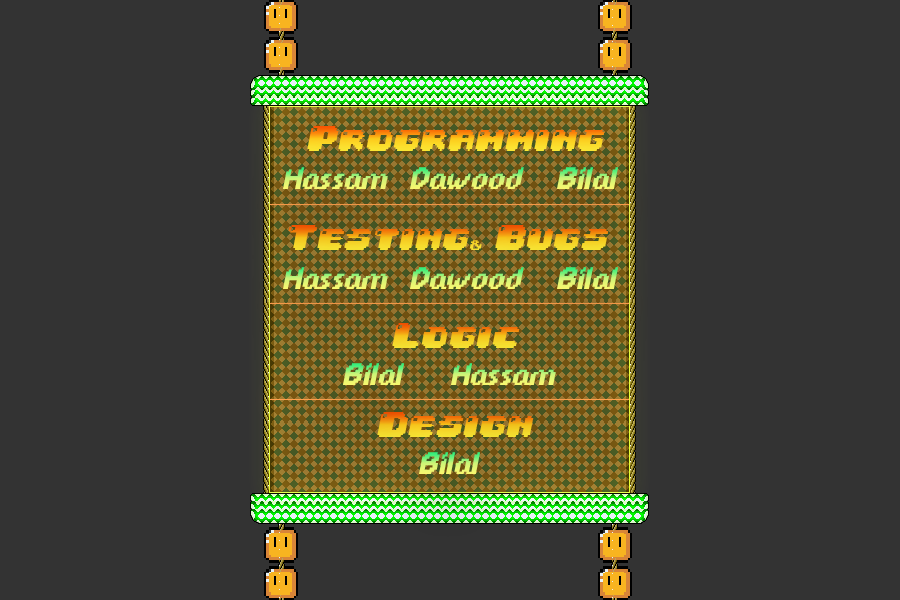
<style>
.page{position:relative;width:900px;height:600px;background:#333333}
.page>*{position:absolute;margin:0}
.t1{font:30px "04b30";font-style:italic;scale:1.11 1}
.t2{font:33.8px "DPComicRegular";font-style:italic;scale:1.11 1}
.t3{font:11.2px "PublicPixel";font-style:italic;scale:1.11 1}
</style>
<div class="page">
<p class="t1" style="left:307px;top:126px;width:298px;height:25px">Programming</p>
<p class="t2" style="left:283px;top:167px;width:105px;height:22px">Hassam</p>
<p class="t2" style="left:410px;top:167px;width:114px;height:22px">Dawood</p>
<p class="t2" style="left:557px;top:167px;width:61px;height:22px">Bilal</p>
<p class="t1" style="left:288px;top:225px;width:321px;height:25px">Testing<span class="t3">&amp; </span>Bugs</p>
<p class="t2" style="left:283px;top:267px;width:105px;height:22px">Hassam</p>
<p class="t2" style="left:410px;top:267px;width:114px;height:22px">Dawood</p>
<p class="t2" style="left:557px;top:267px;width:61px;height:22px">Bilal</p>
<p class="t1" style="left:392px;top:323px;width:128px;height:25px">Logic</p>
<p class="t2" style="left:343px;top:363px;width:61px;height:22px">Bilal</p>
<p class="t2" style="left:451px;top:363px;width:105px;height:22px">Hassam</p>
<p class="t1" style="left:377px;top:412px;width:157px;height:25px">Design</p>
<p class="t2" style="left:419px;top:452px;width:61px;height:22px">Bilal</p>
</div>
